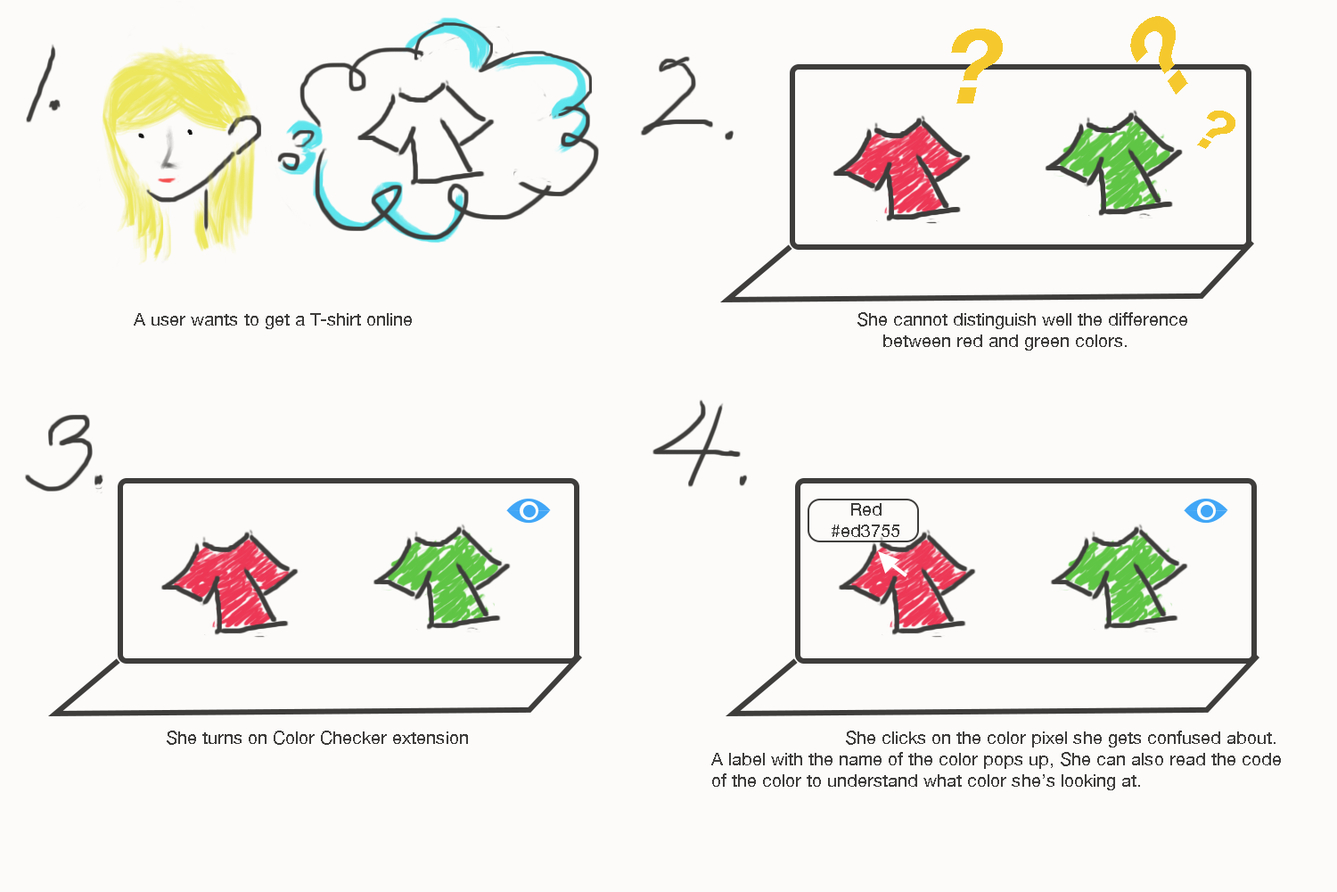
<style>
.page{position:relative;width:1337px;height:892px;background:#fcfbfa}
.page>*{position:absolute;margin:0}
.t1{font:102.6px "HelveticaNeue-BoldItalic";color:#f5c92e}
.t2{font:58.1px "HelveticaNeue-BoldItalic";color:#f5c92e}
.t3{font:17.8px "HelveticaNeue";color:#3e3d3c}
</style>
<div class="page">
<p class="t1" style="left:1131px;top:16px;width:58px;height:79px;rotate:-44deg">?</p>
<p class="t1" style="left:951px;top:29px;width:52px;height:74px">?</p>
<p class="t2" style="left:1197px;top:111px;width:39px;height:38px;rotate:25deg">?</p>
<p class="t3" style="left:134px;top:312px;width:1054px;height:38px">A user wants to get a T-shirt online                                                                                   She cannot distinguish well the difference<br>                              between red and green colors.</p>
<p class="t3" style="left:832px;top:503px;width:68px;height:34px;text-align:center">Red<br>#ed3755</p>
<p class="t3" style="left:167px;top:730px;width:1114px;height:60px">She turns on Color Checker extension             She clicks on the color pixel she gets confused about. <br>                                                                                                      A label with the name of the color pops up, She can also read the code<br>                 of the color to understand what color she’s looking at.</p>
</div>
